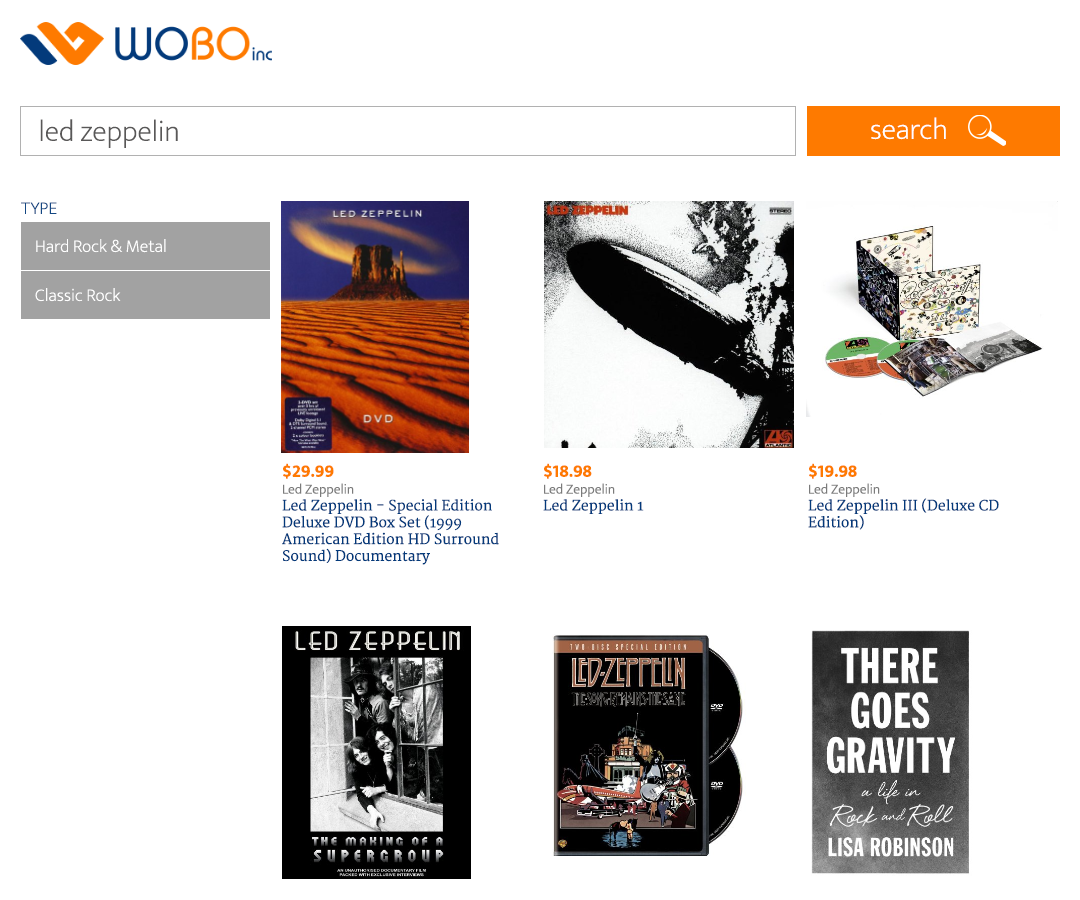
<style>
.page{position:relative;width:1080px;height:900px;background:#ffffff}
.page>*{position:absolute;margin:0}
.t1{font:30px "EkMukta-ExtraLight";color:#595858}
.t2{font:30px "EkMukta-ExtraLight";color:#ffffff}
.t3{font:18px "EkMukta-ExtraLight";color:#134783}
.t4{font:18px "EkMukta-ExtraLight";color:#ffffff}
.t5{font:14px "Merriweather";color:#033a7b}
.t6{font:18px "EkMukta-Bold";color:#fe7a00}
.t7{font:14px "EkMukta-Light";color:#7b7b7b}
</style>
<div class="page">
<p class="t1" style="left:40px;top:119px;width:138px;height:29px">led zeppelin</p>
<p class="t2" style="left:871px;top:117px;width:75px;height:23px">search</p>
<p class="t3" style="left:21px;top:202px;width:36px;height:12px">TYPE</p>
<p class="t4" style="left:36px;top:239px;width:130px;height:14px">Hard Rock &amp; Metal</p>
<p class="t4" style="left:35px;top:288px;width:86px;height:14px">Classic Rock</p>
<p class="t5" style="left:282px;top:463px;width:217px;height:102px"><span class="t6">$29.99<br></span><span class="t7">Led Zeppelin<br></span>Led Zeppelin - Special Edition Deluxe DVD Box Set (1999 American Edition HD Surround Sound) Documentary</p>
<p class="t5" style="left:543px;top:463px;width:101px;height:51px"><span class="t6">$18.98<br></span><span class="t7">Led Zeppelin<br></span>Led Zeppelin 1</p>
<p class="t5" style="left:808px;top:463px;width:191px;height:67px"><span class="t6">$19.98<br></span><span class="t7">Led Zeppelin<br></span>Led Zeppelin III (Deluxe CD Edition)</p>
</div>
